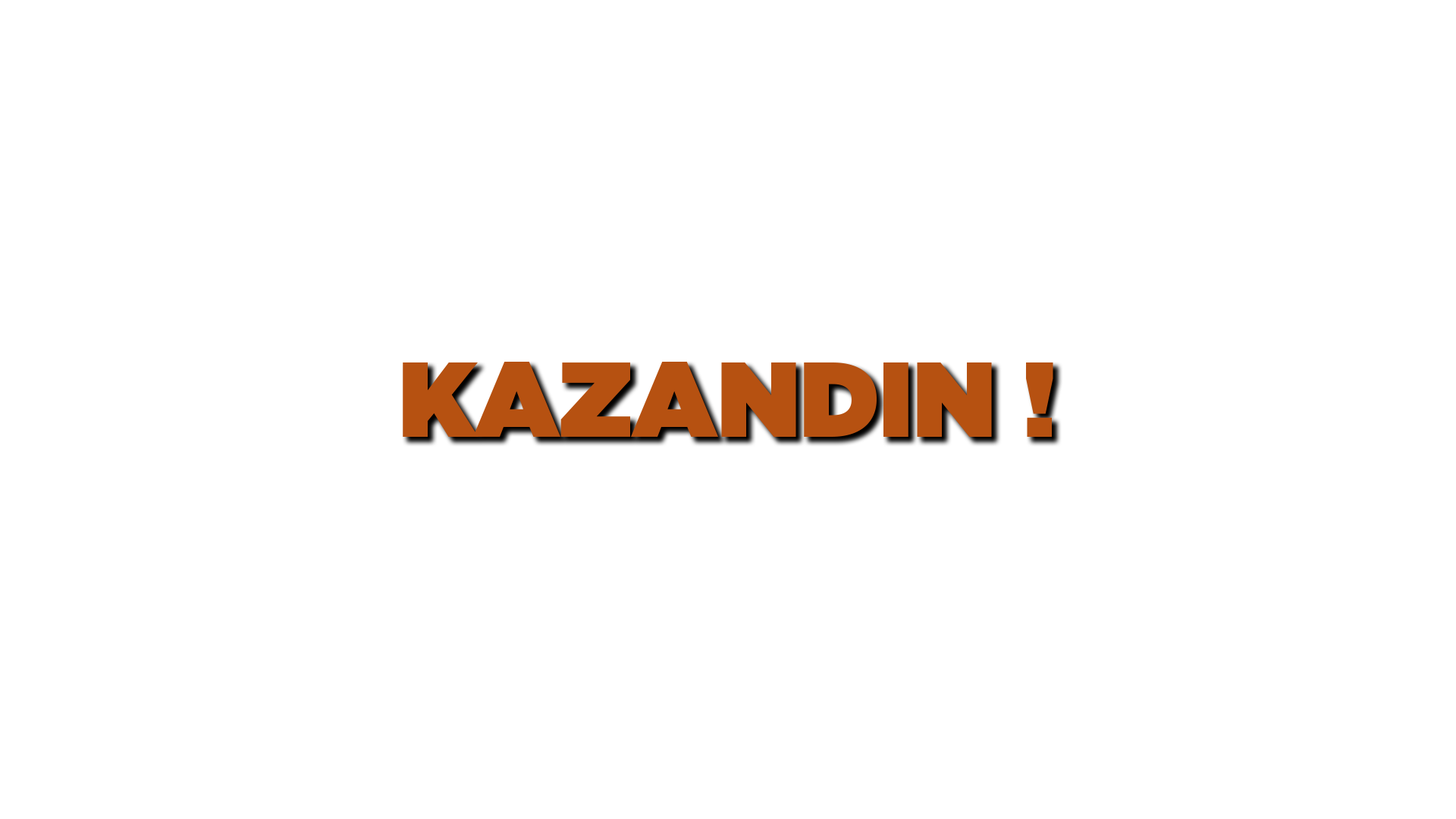
<style>
.page{position:relative;width:1456px;height:819px;background:#ffffff}
.page>*{position:absolute;margin:0}
.t1{font:106.1px "Gotham-Ultra";color:#b65111}
</style>
<div class="page">
<p class="t1" style="left:403px;top:362px;width:650px;height:75px">KAZANDIN !</p>
</div>
